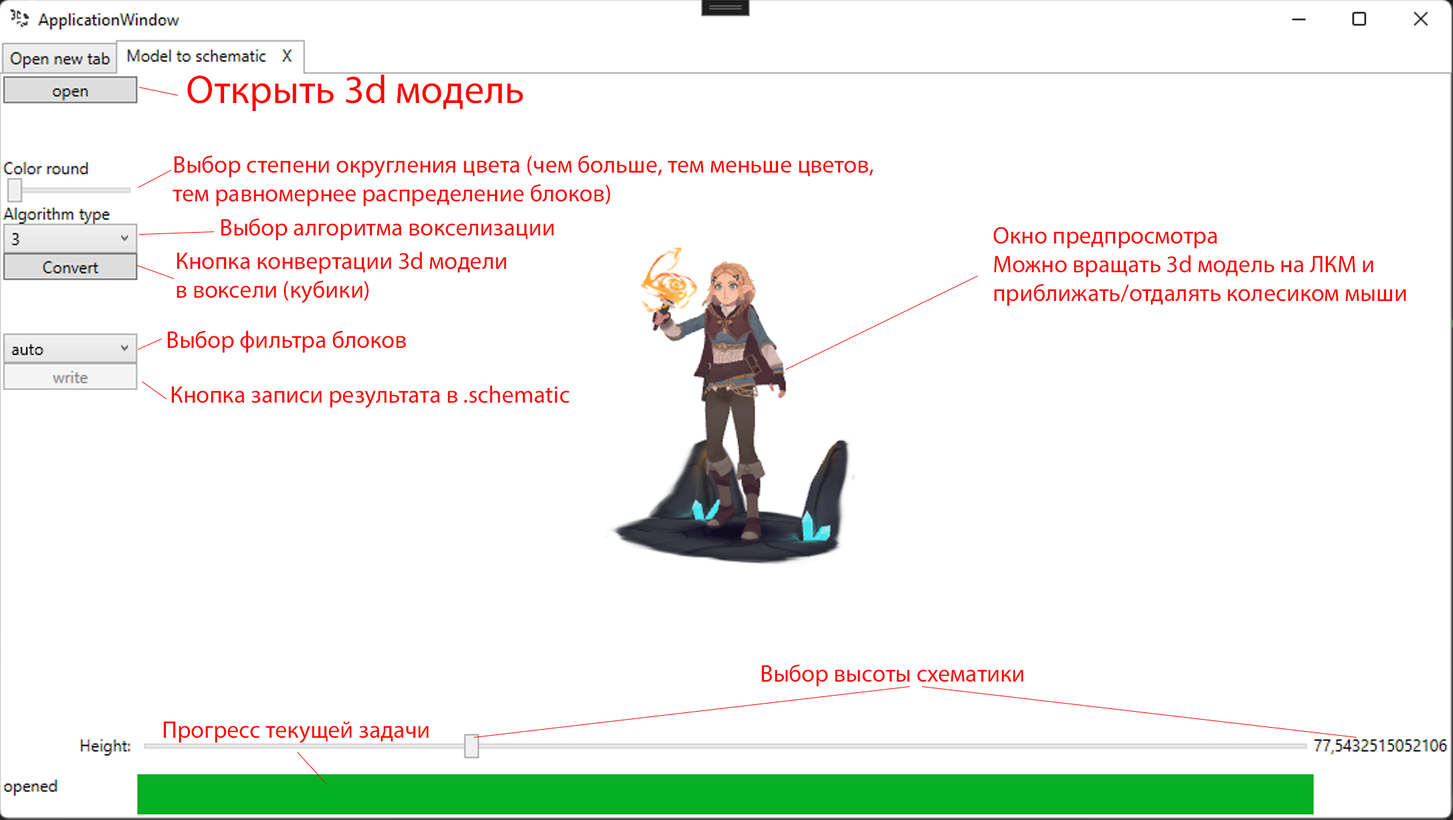
<style>
.page{position:relative;width:1453px;height:820px;background:#ffffff}
.page>*{position:absolute;margin:0}
.t1{font:40.2px "MyriadPro-Regular";color:#ff0000}
.t2{font:24.1px "MyriadPro-Regular";color:#ff0000}
</style>
<div class="page">
<p class="t1" style="left:187px;top:74px;width:336px;height:37px">Открыть 3d модель</p>
<p class="t2" style="left:173px;top:155px;width:701px;height:52px">Выбор степени округления цвета (чем больше, тем меньше цветов,<br>тем равномернее распределение блоков)</p>
<p class="t2" style="left:221px;top:218px;width:333px;height:23px">Выбор алгоритма вокселизации</p>
<p class="t2" style="left:994px;top:227px;width:413px;height:79px">Окно предпросмотра<br>Можно вращать 3d модель на ЛКМ и<br>приближать/отдалять колесиком мыши</p>
<p class="t2" style="left:177px;top:252px;width:330px;height:51px">Кнопка конвертации 3d модели<br>в воксели (кубики)</p>
<p class="t2" style="left:167px;top:331px;width:239px;height:22px">Выбор фильтра блоков</p>
<p class="t2" style="left:171px;top:385px;width:398px;height:23px">Кнопка записи результата в .schematic</p>
<p class="t2" style="left:762px;top:664px;width:262px;height:23px">Выбор высоты схематики</p>
<p class="t2" style="left:163px;top:721px;width:266px;height:22px">Прогресс текущей задачи</p>
</div>
